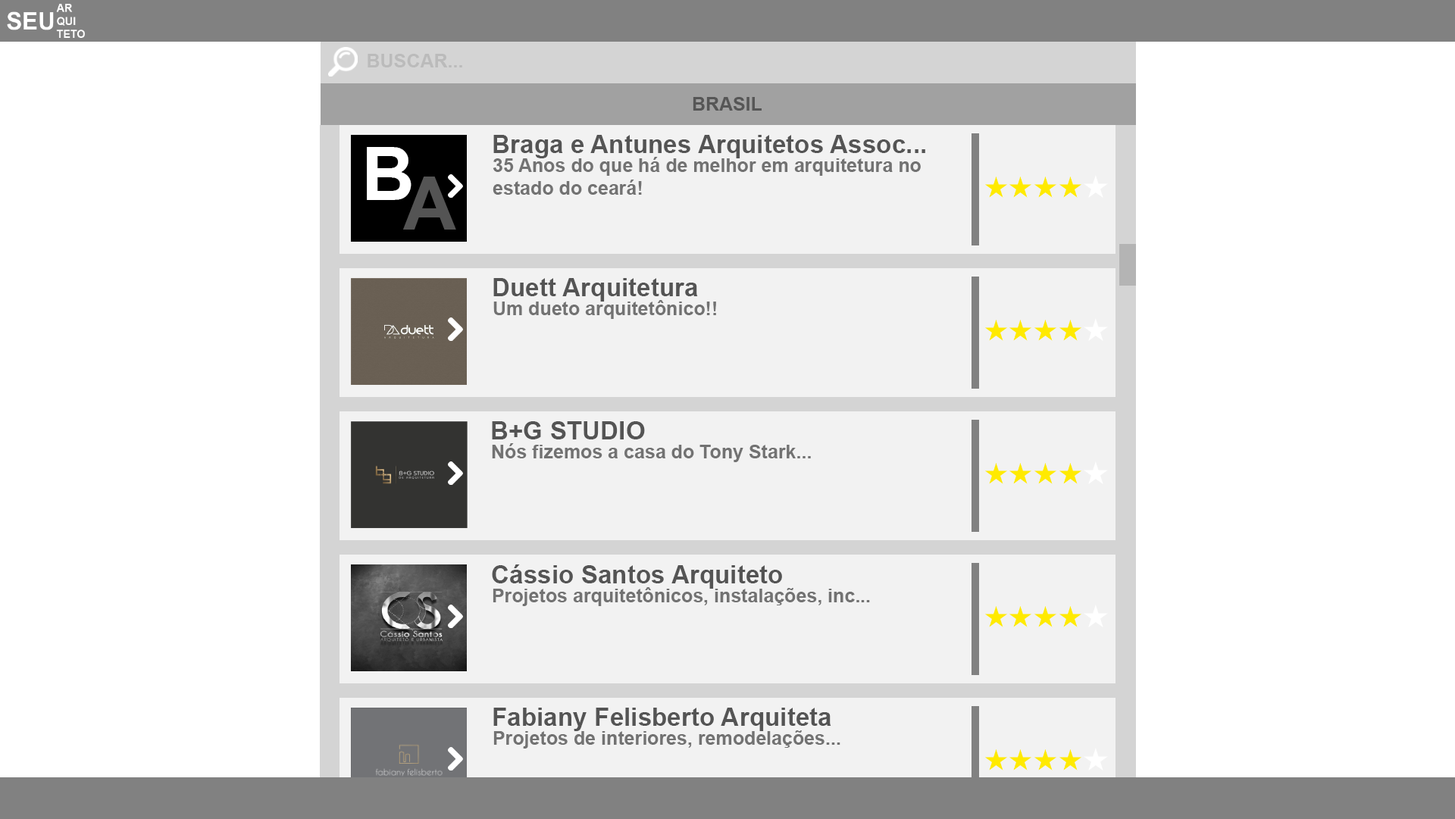
<style>
.page{position:relative;width:1455px;height:819px;background:#ffffff}
.page>*{position:absolute;margin:0}
.t1{font:18.9px "Arial-BoldMT";color:#bbbbbb}
.t2{font:18.9px "Arial-BoldMT";color:#565656}
.t3{font:25.3px "Arial-BoldMT";color:#545454}
.t4{font:73.8px "Arial-BoldMT";color:#ffffff}
.t5{font:18.9px "Arial-BoldMT";color:#727272}
</style>
<div class="page">
<p class="t1" style="left:368px;top:54px;width:94px;height:13px">BUSCAR...</p>
<p class="t2" style="left:693px;top:97px;width:69px;height:14px">BRASIL</p>
<p class="t3" style="left:493px;top:135px;width:432px;height:23px">Braga e Antunes Arquitetos Assoc...</p>
<p class="t4" style="left:367px;top:147px;width:45px;height:53px">B</p>
<p class="t5" style="left:493px;top:157px;width:428px;height:38px">35 Anos do que há de melhor em arquitetura no<br>estado do ceará!</p>
<p class="t3" style="left:493px;top:278px;width:205px;height:24px">Duett Arquitetura</p>
<p class="t5" style="left:493px;top:300px;width:223px;height:19px">Um dueto arquitetônico!!</p>
<p class="t3" style="left:492px;top:421px;width:153px;height:19px">B+G STUDIO</p>
<p class="t5" style="left:492px;top:443px;width:319px;height:19px">Nós fizemos a casa do Tony Stark...</p>
<p class="t3" style="left:492px;top:565px;width:290px;height:24px">Cássio Santos Arquiteto</p>
<p class="t5" style="left:493px;top:587px;width:377px;height:19px">Projetos arquitetônicos, instalações, inc...</p>
<p class="t3" style="left:493px;top:708px;width:338px;height:23px">Fabiany Felisberto Arquiteta</p>
<p class="t5" style="left:493px;top:731px;width:348px;height:18px">Projetos de interiores, remodelações...</p>
</div>
